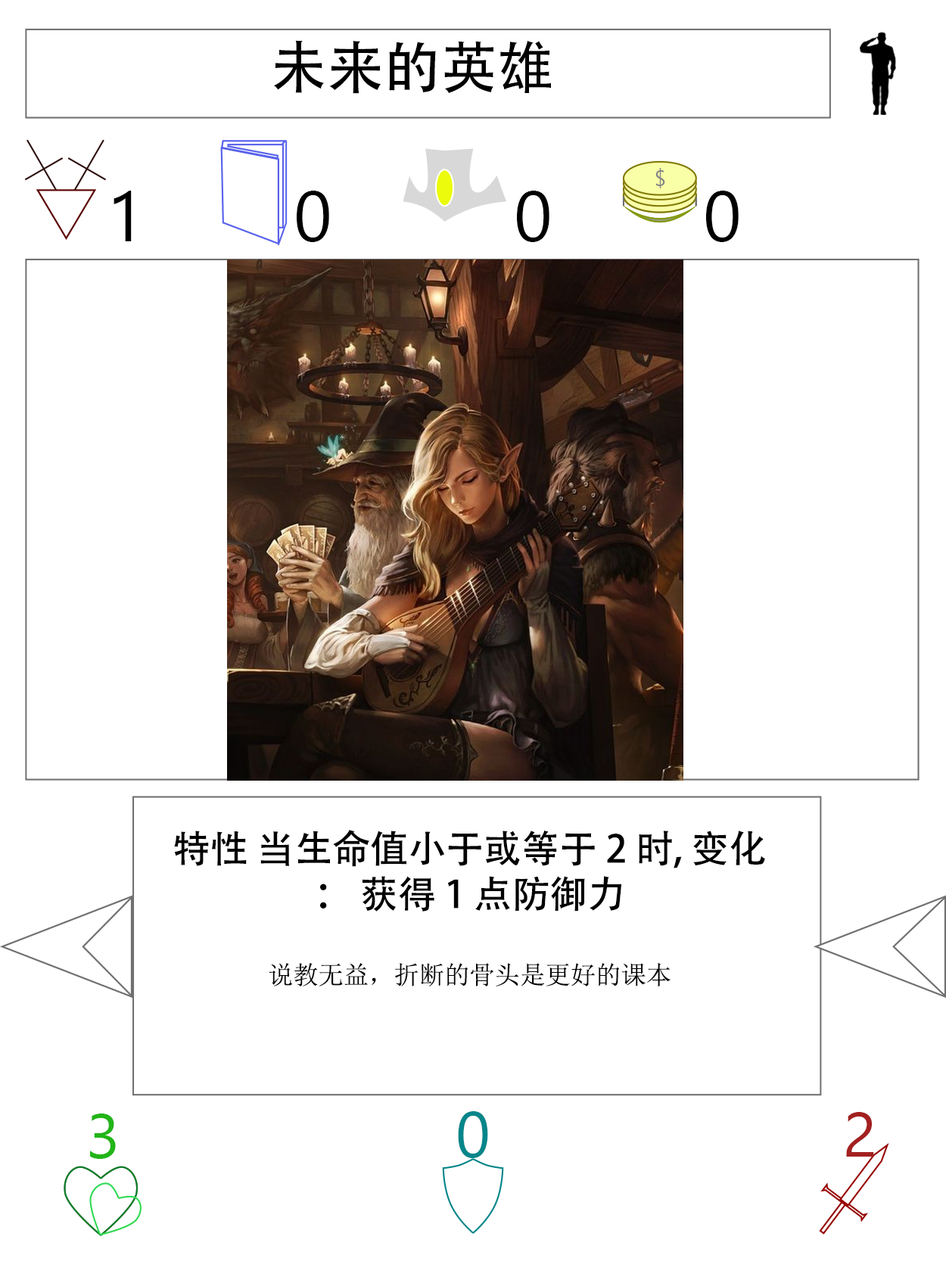
<style>
.page{position:relative;width:946px;height:1261px;background:#ffffff}
.page>*{position:absolute;margin:0}
.t1{font:56.7px "AdobeHeitiStd-Regular";color:#000000}
.t2{font:70.9px "SegoeUI";color:#000000}
.t3{font:37.8px "AdobeHeitiStd-Regular";color:#000000}
.t4{font:25.2px "NSimSun";color:#000000}
.t5{font:63px "SegoeUI";color:#22b518}
.t6{font:64.6px "SegoeUI";color:#05868a}
.t7{font:63px "SegoeUI";color:#a32020}
</style>
<div class="page">
<p class="t1" style="left:273px;top:40px;width:278px;height:54px">未来的英雄</p>
<p class="t2" style="left:113px;top:191px;width:19px;height:50px">1</p>
<p class="t2" style="left:297px;top:191px;width:32px;height:51px">0</p>
<p class="t2" style="left:517px;top:191px;width:32px;height:51px">0</p>
<p class="t2" style="left:706px;top:191px;width:32px;height:51px">0</p>
<p class="t3" style="left:174px;top:830px;width:591px;height:156px;text-align:center">特性 当生命值小于或等于 2 时, 变化： 获得 1 点防御力<br><br><span class="t4">说教无益，折断的骨头是更好的课本</span></p>
<p class="t5" style="left:90px;top:1114px;width:26px;height:45px">3</p>
<p class="t6" style="left:458px;top:1111px;width:30px;height:47px">0</p>
<p class="t7" style="left:846px;top:1112px;width:28px;height:45px">2</p>
</div>
